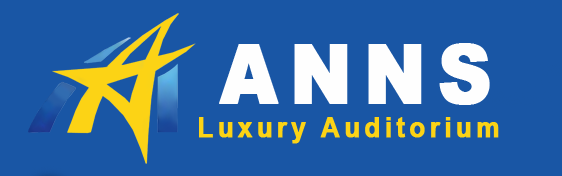
<style>
.page{position:relative;width:562px;height:176px;background:#1956a5}
.page>*{position:absolute;margin:0}
.t1{font:81.6px "Arial-Black";letter-spacing:0.14em;color:#fefefe;font-weight:bold;scale:0.91 1}
.t2{font:27.9px "Arial-BoldMT";letter-spacing:0.14em;color:#fcd315;font-weight:bold;scale:0.93 1}
</style>
<div class="page">
<p class="t1" style="left:219px;top:43px;width:271px;height:62px">ANNS</p>
<p class="t2" style="left:199px;top:117px;width:300px;height:27px">Luxury Auditorium</p>
</div>
